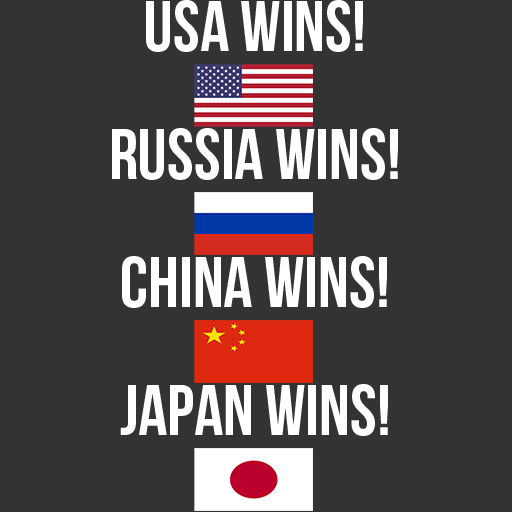
<style>
.page{position:relative;width:512px;height:512px;background:#333333}
.page>*{position:absolute;margin:0}
.t1{font:72px "BebasNeue";color:#ffffff}
</style>
<div class="page">
<p class="t1" style="left:146px;top:0px;width:217px;height:52px">USA WINS!</p>
<p class="t1" style="left:112px;top:128px;width:286px;height:52px">RUSSIA WINS!</p>
<p class="t1" style="left:122px;top:256px;width:265px;height:52px">CHINA WINS!</p>
<p class="t1" style="left:120px;top:384px;width:268px;height:52px">japan wins!</p>
</div>
